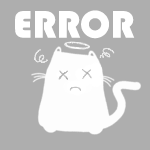
<style>
.page{position:relative;width:150px;height:150px;background:#aeaeae}
.page>*{position:absolute;margin:0}
.t1{font:40px "STHupo";color:#ffffff}
</style>
<div class="page">
<p class="t1" style="left:15px;top:10px;width:120px;height:29px">ERROR</p>
</div>
